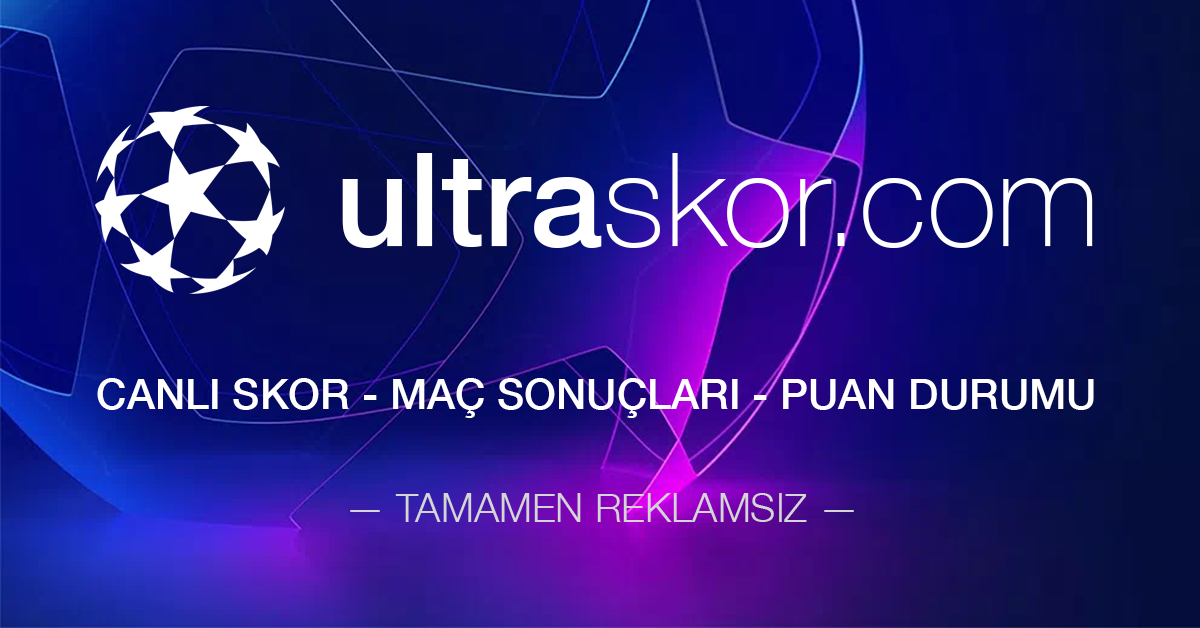
<style>
.page{position:relative;width:1200px;height:628px}
.page>*{position:absolute;margin:0}
.t1{font:130px "HelveticaNeue-Thin";color:#ffffff}
.t2{font:130px "HelveticaNeue-Medium";color:#ffffff}
.t3{font:42px "HelveticaNeue-Medium";color:#ffffff}
.t4{font:40px "HelveticaNeue-Light";color:#d5d5d5}
</style>
<div class="page">
<p class="t1" style="left:342px;top:153px;width:751px;height:95px"><span class="t2">ultra</span>skor.com</p>
<p class="t3" style="left:97px;top:378px;width:997px;height:40px">CANLI SKOR - MAÇ SONUÇLARI - PUAN DURUMU</p>
<p class="t4" style="left:350px;top:493px;width:504px;height:29px">— TAMAMEN REKLAMSIZ —</p>
</div>
